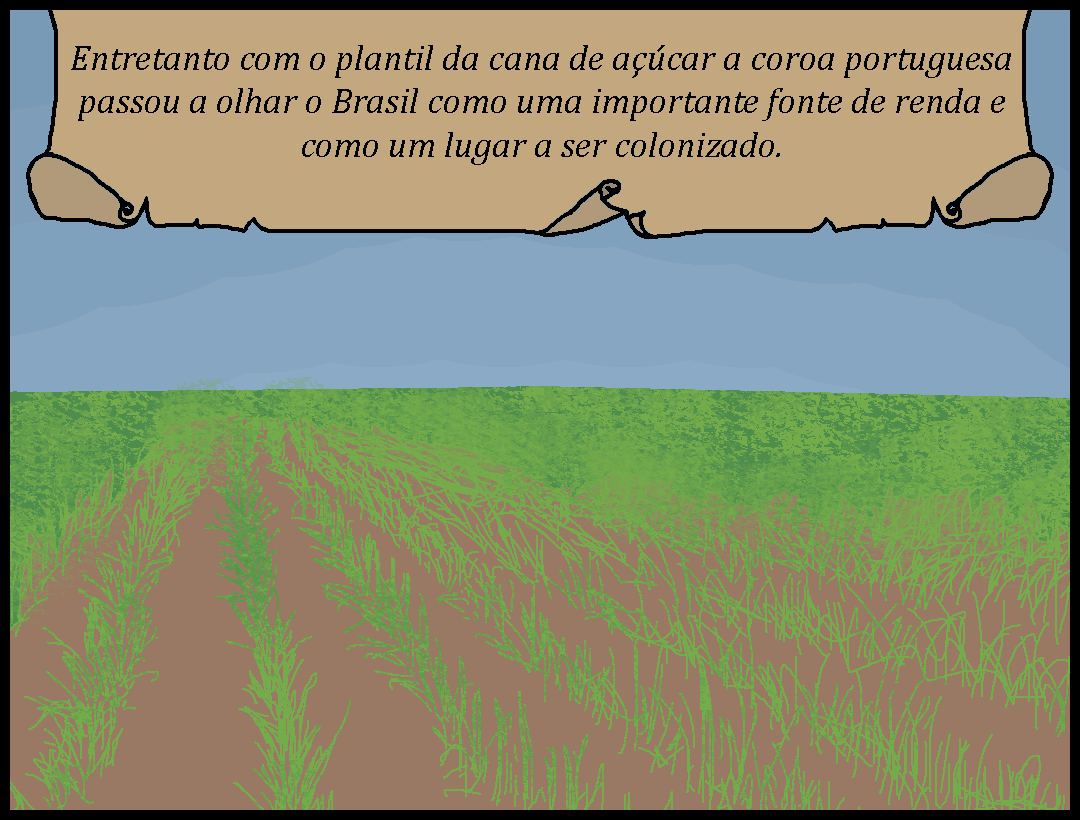
<style>
.page{position:relative;width:1080px;height:820px;background:#997864}
.page>*{position:absolute;margin:0}
.t1{font:36px "Cambria-Italic";color:#000000}
.t2{font:40px "Cambria-Italic";color:#000000}
</style>
<div class="page">
<p class="t1" style="left:71px;top:45px;width:940px;height:120px;text-align:center">Entretanto com o plantil da cana de açúcar a coroa portuguesa passou a olhar o Brasil como uma importante fonte de renda e como um lugar a ser colonizado.<br><span class="t2"><br>renda e como um lugar a ser colonizado</span></p>
</div>
